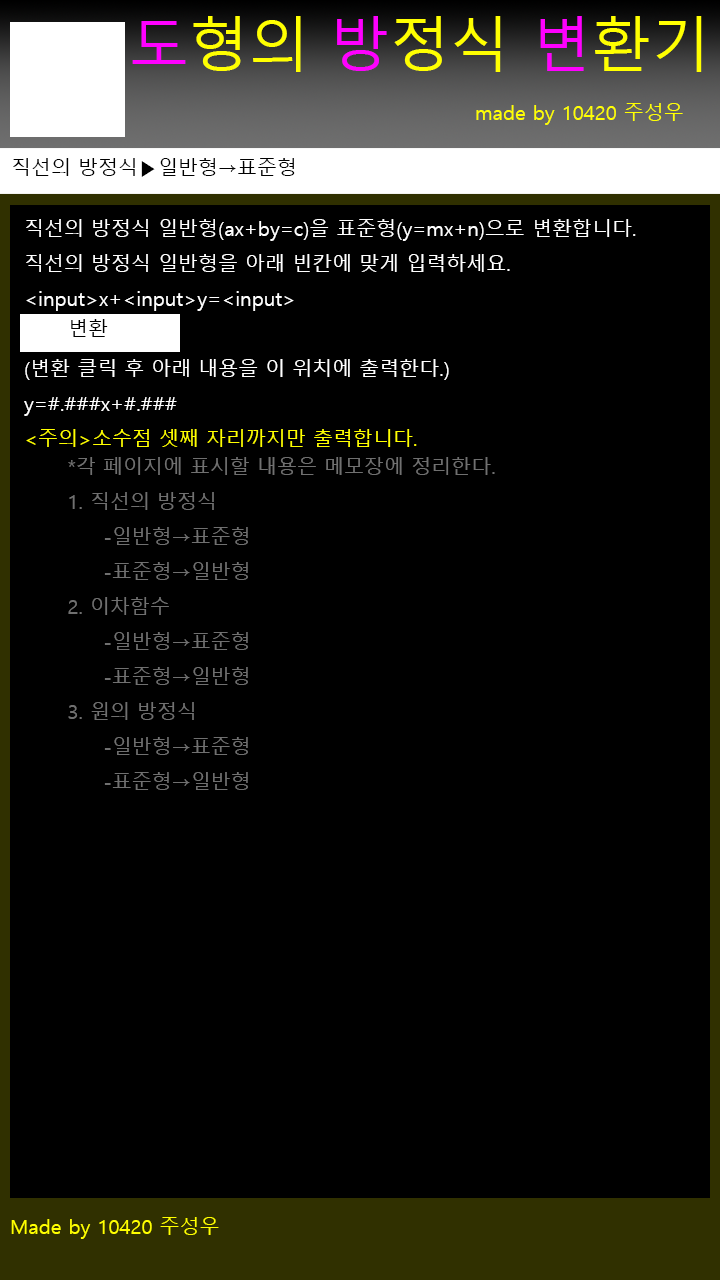
<style>
.page{position:relative;width:720px;height:1280px;background:#000000}
.page>*{position:absolute;margin:0}
.t1{font:60px "MalgunGothic";color:#ffff00}
.t2{font:60px "MalgunGothic";color:#ff00ff}
.t3{font:20px "MalgunGothic";color:#ffff00}
.t4{font:20px "MalgunGothic";color:#000000}
.t5{font:20px "MalgunGothic";color:#ffffff}
.t6{font:20px "MalgunGothic";color:#707070}
</style>
<div class="page">
<p class="t1" style="left:132px;top:16px;width:570px;height:56px"><span class="t2">도</span>형의 <span class="t2">방</span>정식 <span class="t2">변</span>환기</p>
<p class="t3" style="left:476px;top:103px;width:207px;height:22px">made by 10420 주성우</p>
<p class="t4" style="left:13px;top:158px;width:282px;height:19px">직선의 방정식▶일반형→표준형</p>
<p class="t5" style="left:24px;top:219px;width:612px;height:228px">직선의 방정식 일반형(ax+by=c)을 표준형(y=mx+n)으로 변환합니다.<br>직선의 방정식 일반형을 아래 빈칸에 맞게 입력하세요.<br>&lt;input&gt;x+&lt;input&gt;y=&lt;input&gt;<br><br>(변환 클릭 후 아래 내용을 이 위치에 출력한다.)<br>y=#.###x+#.###<br><span class="t3">&lt;주의&gt;소수점 셋째 자리까지만 출력합니다.</span></p>
<p class="t4" style="left:71px;top:319px;width:37px;height:18px">변환</p>
<p class="t6" style="left:68px;top:457px;width:427px;height:333px">*각 페이지에 표시할 내용은 메모장에 정리한다.<br>1. 직선의 방정식<br> -일반형→표준형<br> -표준형→일반형<br>2. 이차함수<br> -일반형→표준형<br> -표준형→일반형<br>3. 원의 방정식<br> -일반형→표준형<br> -표준형→일반형</p>
<p class="t3" style="left:11px;top:1217px;width:208px;height:22px">Made by 10420 주성우</p>
</div>
